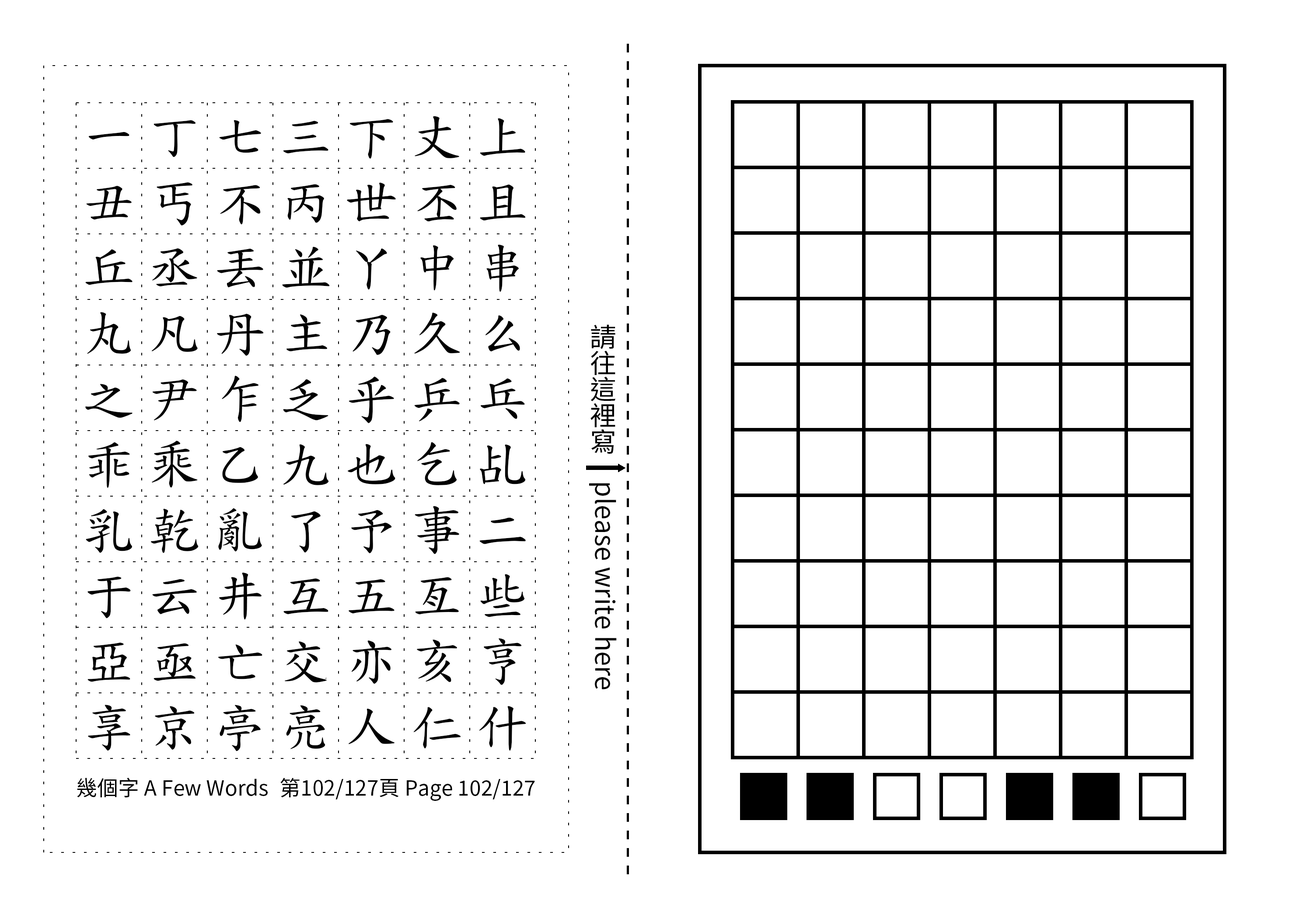
<style>
.page{position:relative;width:1299px;height:918px;background:#ffffff}
.page>*{position:absolute;margin:0}
.t1{font:52.5px/65.6px "TW-Kai-98_1";letter-spacing:0.25em;color:#000000}
.t2{font:26.2px "SourceHanSansTC-Regular";color:#000000}
.t3{font:21px "SourceHanSansTC-Regular";color:#000000}
</style>
<div class="page">
<p class="t1" style="left:85px;top:116px;width:441px;height:636px;text-align:center">一丁七三下丈上丑丐不丙世丕且丘丞丟並丫中串丸凡丹主乃久么之尹乍乏乎乒乓乖乘乙九也乞乩乳乾亂了予事二于云井互五亙些亞亟亡交亦亥亨享京亭亮人仁什</p>
<p class="t2" style="left:589px;top:324px;width:28px;height:366px;text-align:center">請往這裡寫　please write here</p>
<p class="t3" style="left:77px;top:778px;width:191px;height:20px">幾個字 A Few Words</p>
<p class="t3" style="left:280px;top:778px;width:255px;height:23px">第102/127頁 Page 102/127</p>
</div>
